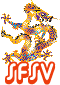
<style>
.page{position:relative;width:60px;height:85px;background:#ffffff}
.page>*{position:absolute;margin:0}
.t1{font:24px "AlbaSuper";color:#ec3c0d}
</style>
<div class="page">
<p class="t1" style="left:5px;top:61px;width:51px;height:24px">SFSV</p>
</div>
